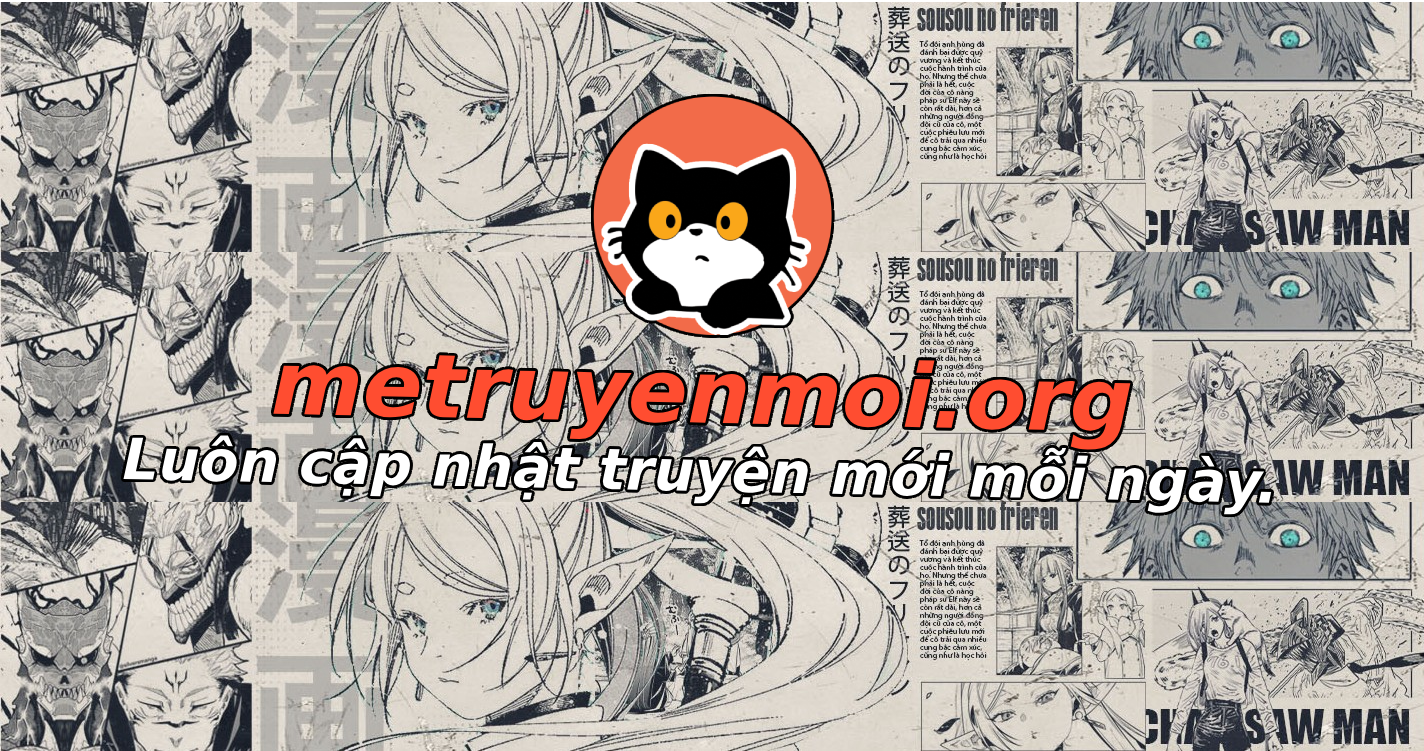
<style>
.page{position:relative;width:1424px;height:751px}
.page>*{position:absolute;margin:0}
.t1{font:57px "DejaVuSans-BoldOblique";color:#ffffff}
.t2{font:88px "DejaVuSans-BoldOblique";color:#ff4d30}
</style>
<div class="page">
<p class="t1" style="left:123px;top:355px;width:1149px;height:160px;text-align:center;rotate:1deg"><span class="t2">metruyenmoi.org<br></span>Luôn cập nhật truyện mới mỗi ngày.</p>
</div>
